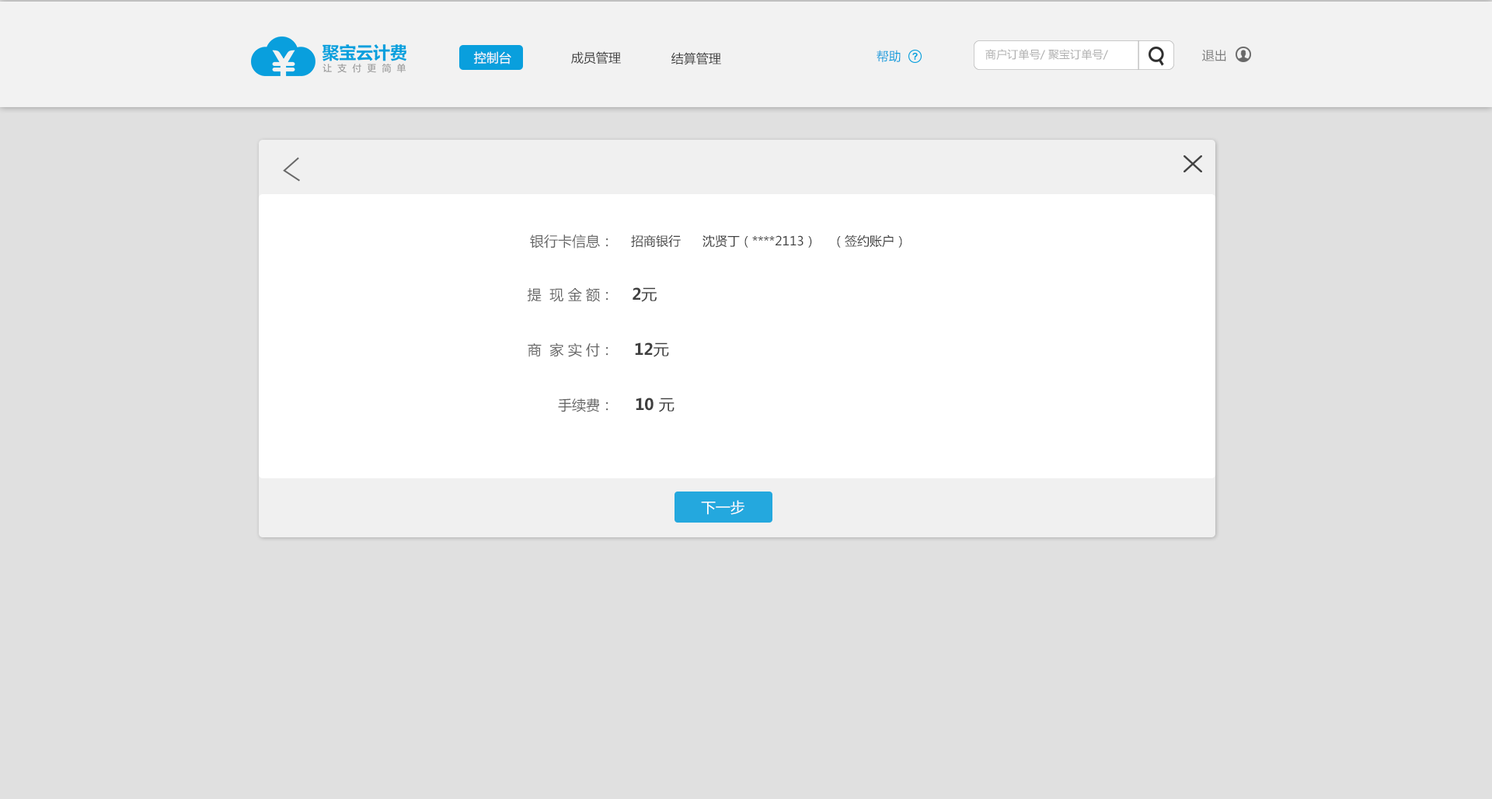
<style>
.page{position:relative;width:1492px;height:799px;background:#e0e0e0}
.page>*{position:absolute;margin:0}
.t1{font:12.4px "MicrosoftYaHei";color:#ffffff}
.t2{font:12.4px "MicrosoftYaHei";color:#3f3f3f}
.t3{font:12.4px "MicrosoftYaHei";color:#099fdd}
.t4{font:10.9px "MicrosoftYaHei";color:#aeaeae}
.t5{font:12.4px "MicrosoftYaHei";color:#7d7d7d}
.t6{font:14px "MicrosoftYaHei";color:#666666}
.t7{font:15.5px "MicrosoftYaHei-Bold";color:#3f3f3f}
.t8{font:15.5px "MicrosoftYaHei";color:#3f3f3f}
.t9{font:14.4px "MicrosoftYaHei";color:#ffffff}
</style>
<div class="page">
<p class="t1" style="left:474px;top:51px;width:37px;height:13px">控制台</p>
<p class="t2" style="left:571px;top:51px;width:50px;height:13px">成员管理</p>
<p class="t2" style="left:671px;top:52px;width:50px;height:13px">结算管理</p>
<p class="t3" style="left:876px;top:50px;width:24px;height:12px">帮助</p>
<p class="t4" style="left:985px;top:49px;width:123px;height:11px">商户订单号/ 聚宝订单号/ 付款方名称</p>
<p class="t5" style="left:1202px;top:50px;width:24px;height:11px">退出</p>
<p class="t6" style="left:530px;top:235px;width:78px;height:14px">银行卡信息：</p>
<p class="t2" style="left:631px;top:235px;width:50px;height:13px">招商银行</p>
<p class="t2" style="left:702px;top:235px;width:110px;height:13px">沈贤丁（****2113）</p>
<p class="t2" style="left:837px;top:235px;width:65px;height:13px">（签约账户）</p>
<p class="t6" style="left:528px;top:287px;width:80px;height:15px">提  现 金 额：</p>
<p class="t7" style="left:632px;top:287px;width:24px;height:15px">2<span class="t8">元</span></p>
<p class="t6" style="left:528px;top:343px;width:80px;height:14px">商  家 实 付：</p>
<p class="t7" style="left:635px;top:343px;width:34px;height:14px">12<span class="t8">元</span></p>
<p class="t6" style="left:558px;top:399px;width:50px;height:14px">手续费：</p>
<p class="t7" style="left:635px;top:398px;width:39px;height:15px">10 <span class="t8">元</span></p>
<p class="t9" style="left:701px;top:500px;width:43px;height:15px">下一步</p>
</div>
